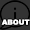
<style>
.page{position:relative;width:30px;height:30px;background:#333333}
.page>*{position:absolute;margin:0}
.t1{font:7px "Arial-Black";color:#ffffff}
</style>
<div class="page">
<p class="t1" style="left:1px;top:19px;width:29px;height:6px">ABOUT</p>
</div>
